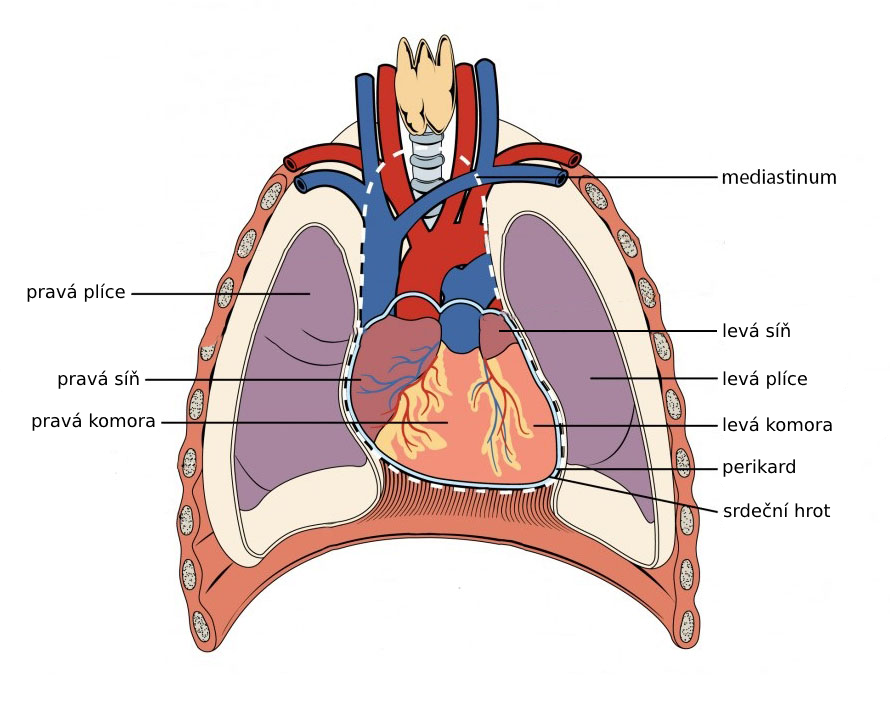
<style>
.page{position:relative;width:890px;height:702px;background:#ffffff}
.page>*{position:absolute;margin:0}
.t1{font:18px "Arial";color:#000000}
</style>
<div class="page">
<p class="t1" style="left:27px;top:283px;width:98px;height:19px">pravá plíce</p>
<p class="t1" style="left:723px;top:322px;width:67px;height:16px">levá síň</p>
<p class="t1" style="left:58px;top:370px;width:81px;height:19px">pravá síň</p>
<p class="t1" style="left:723px;top:370px;width:84px;height:19px">levá plíce</p>
<p class="t1" style="left:32px;top:412px;width:123px;height:19px">pravá komora</p>
<p class="t1" style="left:723px;top:416px;width:109px;height:16px">levá komora</p>
<p class="t1" style="left:723px;top:459px;width:72px;height:18px">perikard</p>
<p class="t1" style="left:723px;top:502px;width:108px;height:16px">srdeční hrot</p>
</div>
